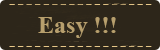
<style>
.page{position:relative;width:160px;height:50px;background:#2d261a}
.page>*{position:absolute;margin:0}
.t1{font:24px "TimesNewRomanPS-BoldMT";color:#b79f6d}
</style>
<div class="page">
<p class="t1" style="left:38px;top:17px;width:78px;height:21px">Easy !!!</p>
</div>
